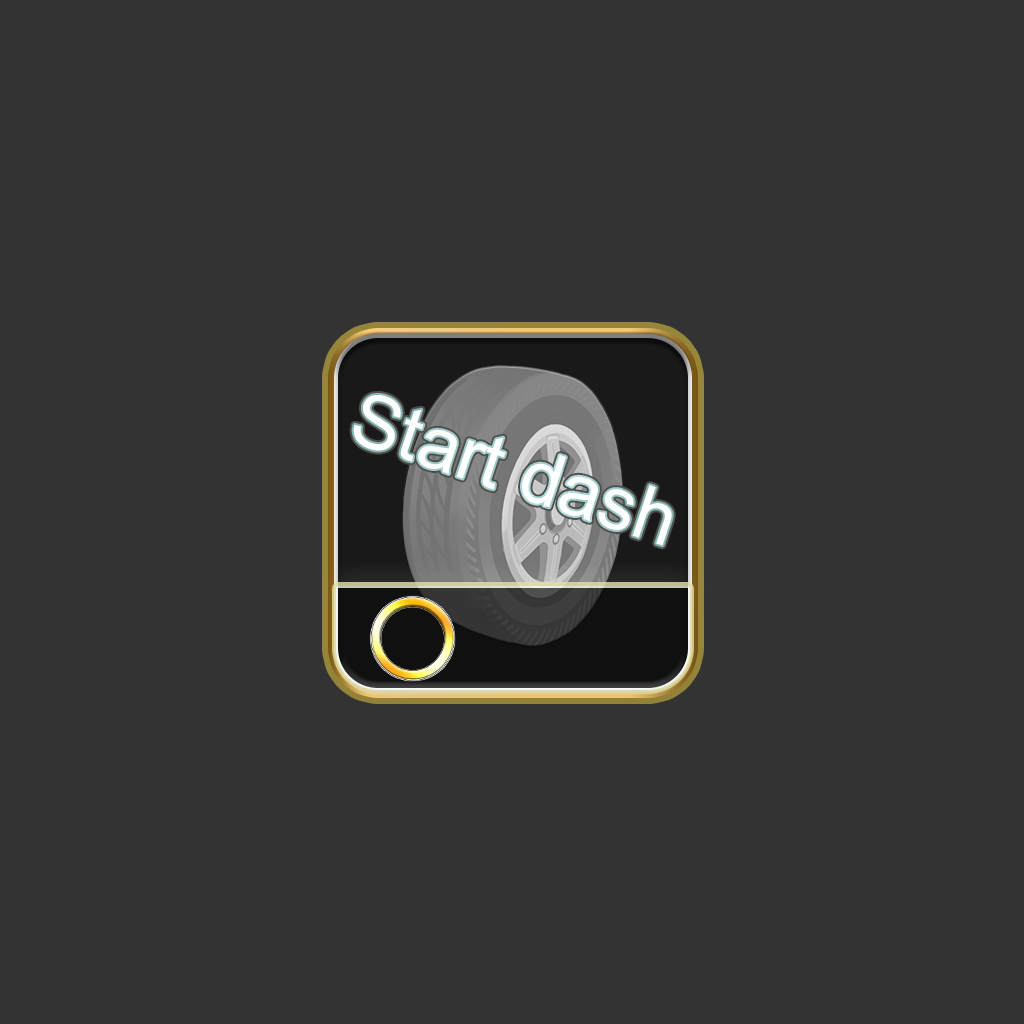
<style>
.page{position:relative;width:1024px;height:1024px;background:#333333}
.page>*{position:absolute;margin:0}
.t1{font:74.3px "ArialMT";color:#ffffff}
</style>
<div class="page">
<p class="t1" style="left:353px;top:395px;width:319px;height:151px;rotate:18deg">Start dash</p>
</div>
